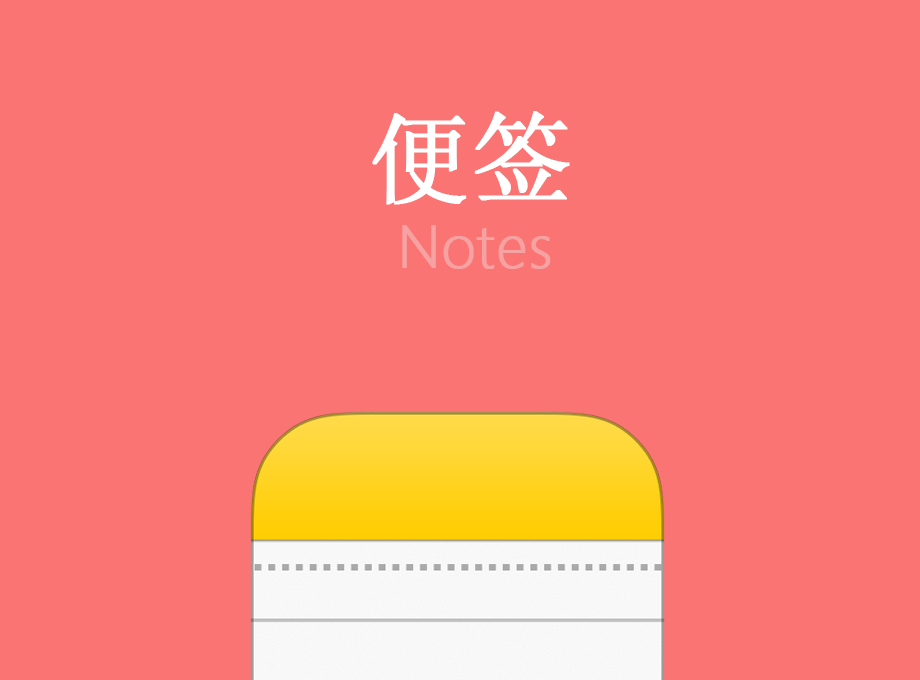
<style>
.page{position:relative;width:920px;height:680px;background:#fa7474}
.page>*{position:absolute;margin:0}
.t1{font:100px "SimSun";color:#ffffff;font-weight:bold}
.t2{font:60px "YuGothicUI-Light";color:#f7a2a2;font-weight:bold}
</style>
<div class="page">
<p class="t1" style="left:372px;top:111px;width:198px;height:94px">便签</p>
<p class="t2" style="left:402px;top:225px;width:149px;height:44px">Notes</p>
</div>
